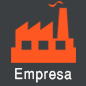
<style>
.page{position:relative;width:86px;height:86px;background:#3c3f41}
.page>*{position:absolute;margin:0}
.t1{font:14.6px "Helvetica-Normal";letter-spacing:0.06em;color:#ffffff;scale:0.9 1}
</style>
<div class="page">
<p class="t1" style="left:15px;top:68px;width:57px;height:15px">Empresa</p>
</div>
